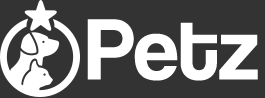
<style>
.page{position:relative;width:265px;height:98px;background:#333333}
.page>*{position:absolute;margin:0}
.t1{font:90.1px "CoolveticaRg-Regular";color:#ffffff}
</style>
<div class="page">
<p class="t1" style="left:87px;top:19px;width:171px;height:62px">Petz</p>
</div>
